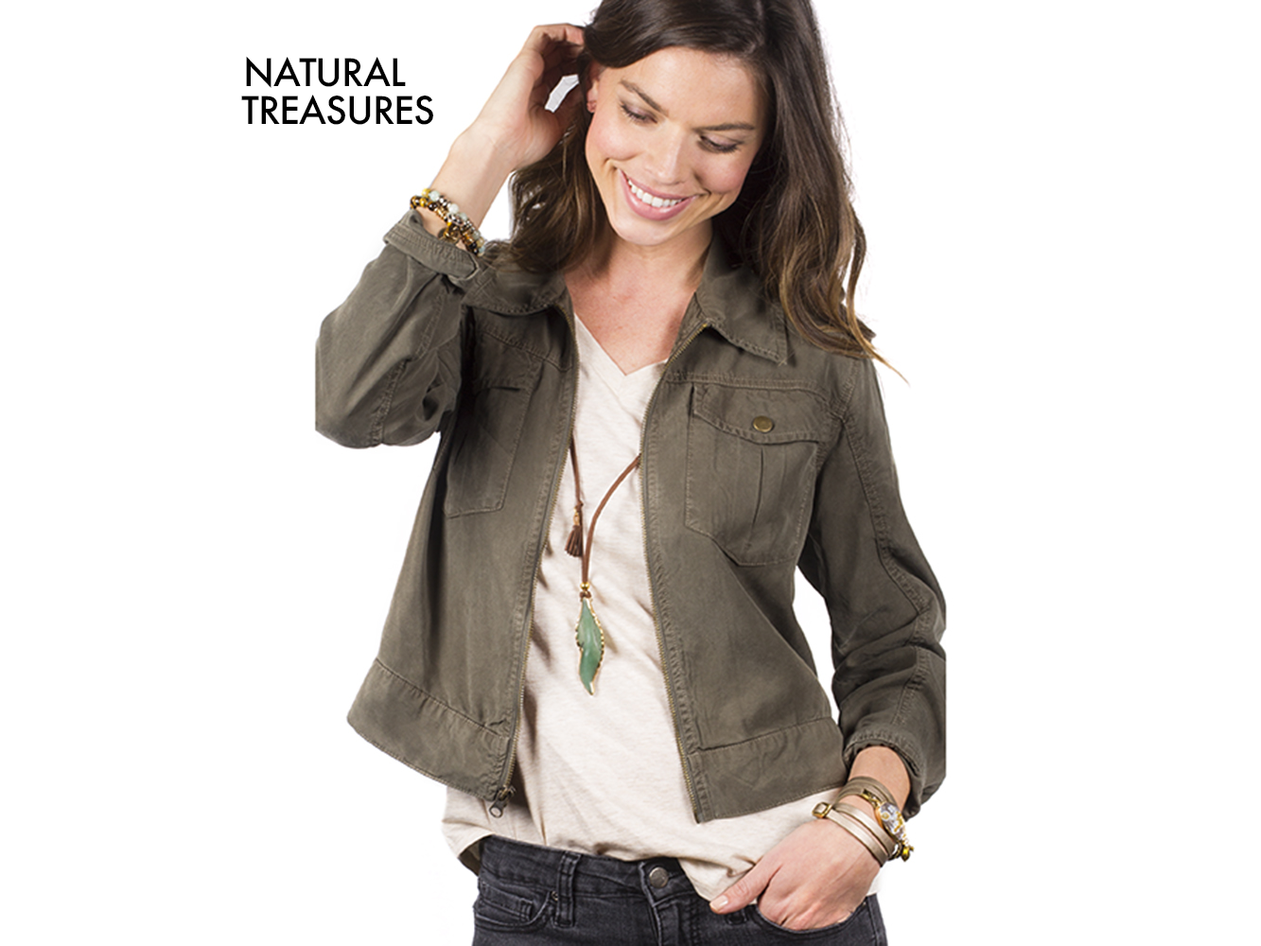
<style>
.page{position:relative;width:1261px;height:946px;background:#ffffff}
.page>*{position:absolute;margin:0}
.t1{font:36.9px "Futura-Medium";letter-spacing:-0.025em;color:#000000}
</style>
<div class="page">
<p class="t1" style="left:246px;top:56px;width:160px;height:32px">NATURAL</p>
<p class="t1" style="left:241px;top:95px;width:192px;height:30px">TREASURES</p>
</div>
